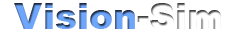
<style>
.page{position:relative;width:250px;height:50px;background:#ffffff}
.page>*{position:absolute;margin:0}
.t1{font:36px "Arial-Black";color:#6ea6fb}
.t2{font:36px "Arial-Black";color:#ffffff}
</style>
<div class="page">
<p class="t1" style="left:14px;top:3px;width:207px;height:26px">Vision<span class="t2">-Sim</span></p>
</div>
